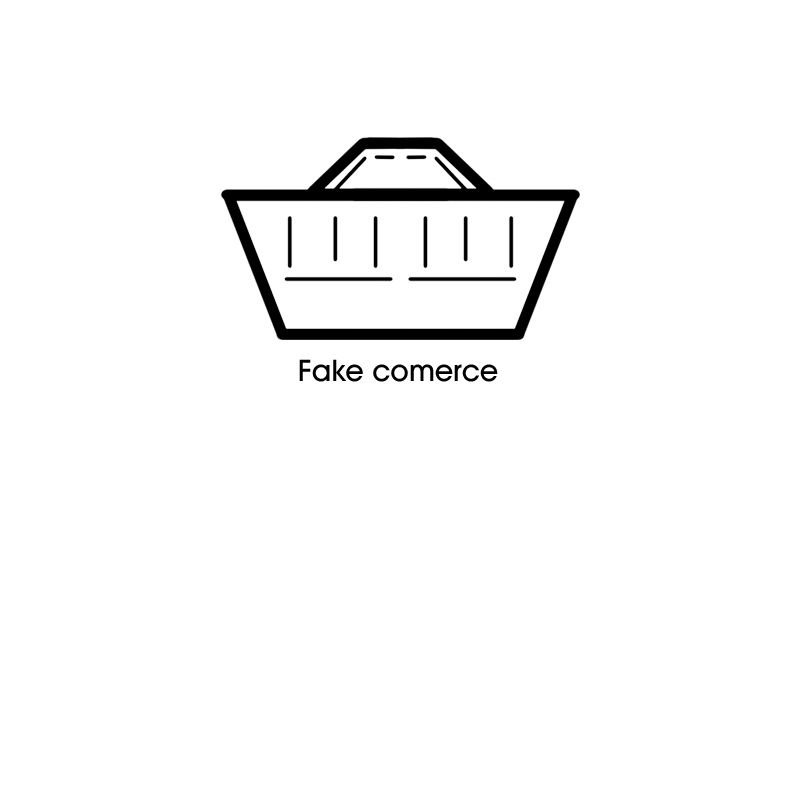
<style>
.page{position:relative;width:800px;height:800px;background:#ffffff}
.page>*{position:absolute;margin:0}
.t1{font:30px "Decker-Bold";color:#000000}
</style>
<div class="page">
<p class="t1" style="left:299px;top:359px;width:199px;height:23px">Fake comerce</p>
</div>
